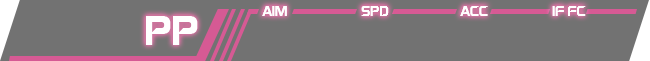
<style>
.page{position:relative;width:650px;height:61px;background:#727272}
.page>*{position:absolute;margin:0}
.t1{font:16px "GayatriRegular";color:#ffffff}
.t2{font:48px "GayatriRegular";color:#ffffff}
</style>
<div class="page">
<p class="t1" style="left:262px;top:6px;width:25px;height:10px">AIM</p>
<p class="t1" style="left:361px;top:6px;width:28px;height:10px">SPD</p>
<p class="t1" style="left:460px;top:6px;width:28px;height:10px">ACC</p>
<p class="t1" style="left:552px;top:6px;width:34px;height:10px">IF FC</p>
<p class="t2" style="left:146px;top:16px;width:52px;height:29px">PP</p>
</div>
